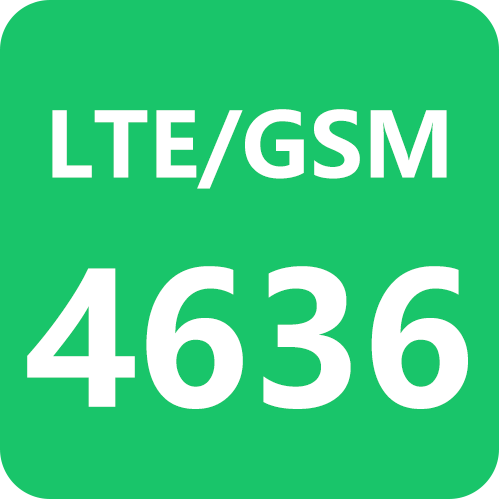
<style>
.page{position:relative;width:500px;height:500px;background:#19c56a}
.page>*{position:absolute;margin:0}
.t1{font:88.8px "MicrosoftYaHeiUI-Bold";color:#ffffff}
.t2{font:182.6px "MicrosoftYaHeiUI-Bold";color:#ffffff}
</style>
<div class="page">
<p class="t1" style="left:52px;top:109px;width:395px;height:80px">LTE/GSM</p>
<p class="t2" style="left:27px;top:266px;width:441px;height:143px">4636</p>
</div>
